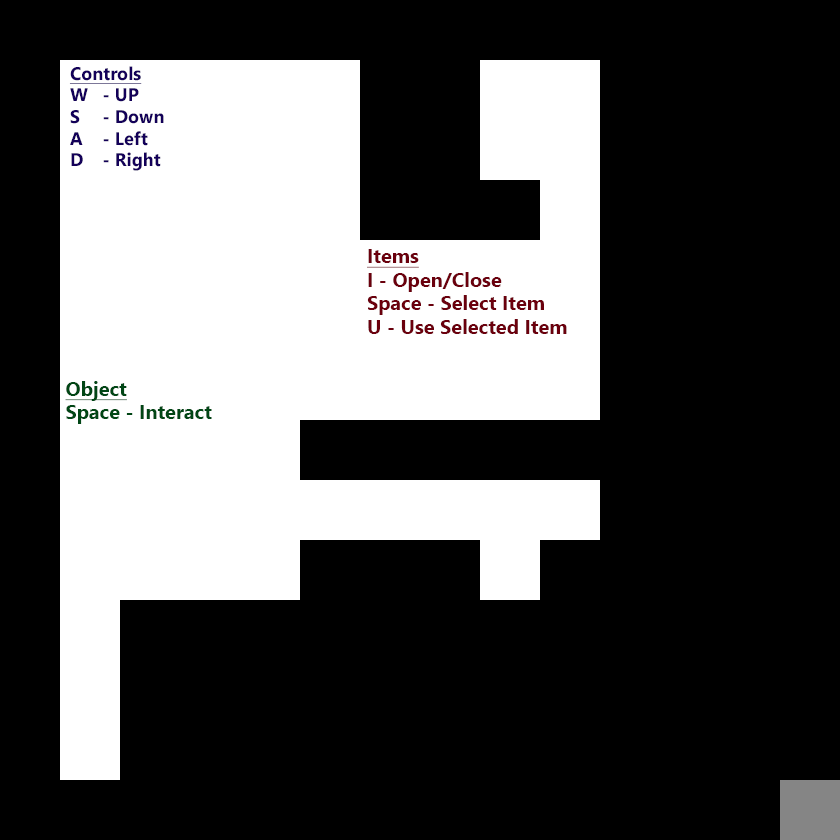
<style>
.page{position:relative;width:840px;height:840px;background:#000000}
.page>*{position:absolute;margin:0}
.t1{font:18.3px/21.7px "NirmalaUI-Bold";color:#130059}
.t2{font:18.3px/21.7px "NirmalaUI-Bold";color:#130059;text-decoration:underline}
.t3{font:20px/23.6px "NirmalaUI-Bold";color:#6b000d}
.t4{font:20px/23.6px "NirmalaUI-Bold";color:#6b000d;text-decoration:underline}
.t5{font:20px/23.6px "NirmalaUI-Bold";color:#014615}
.t6{font:20px/23.6px "NirmalaUI-Bold";color:#014615;text-decoration:underline}
</style>
<div class="page">
<p class="t1" style="left:69px;top:66px;width:95px;height:105px"><span class="t2">Controls<br></span>W - UP<br>S - Down<br>A - Left<br>D - Right</p>
<p class="t3" style="left:367px;top:249px;width:200px;height:85px"><span class="t4">Items<br></span>I - Open/Close<br>Space - Select Item<br>U - Use Selected Item</p>
<p class="t5" style="left:65px;top:381px;width:147px;height:43px"><span class="t6">Object<br></span>Space - Interact</p>
</div>
